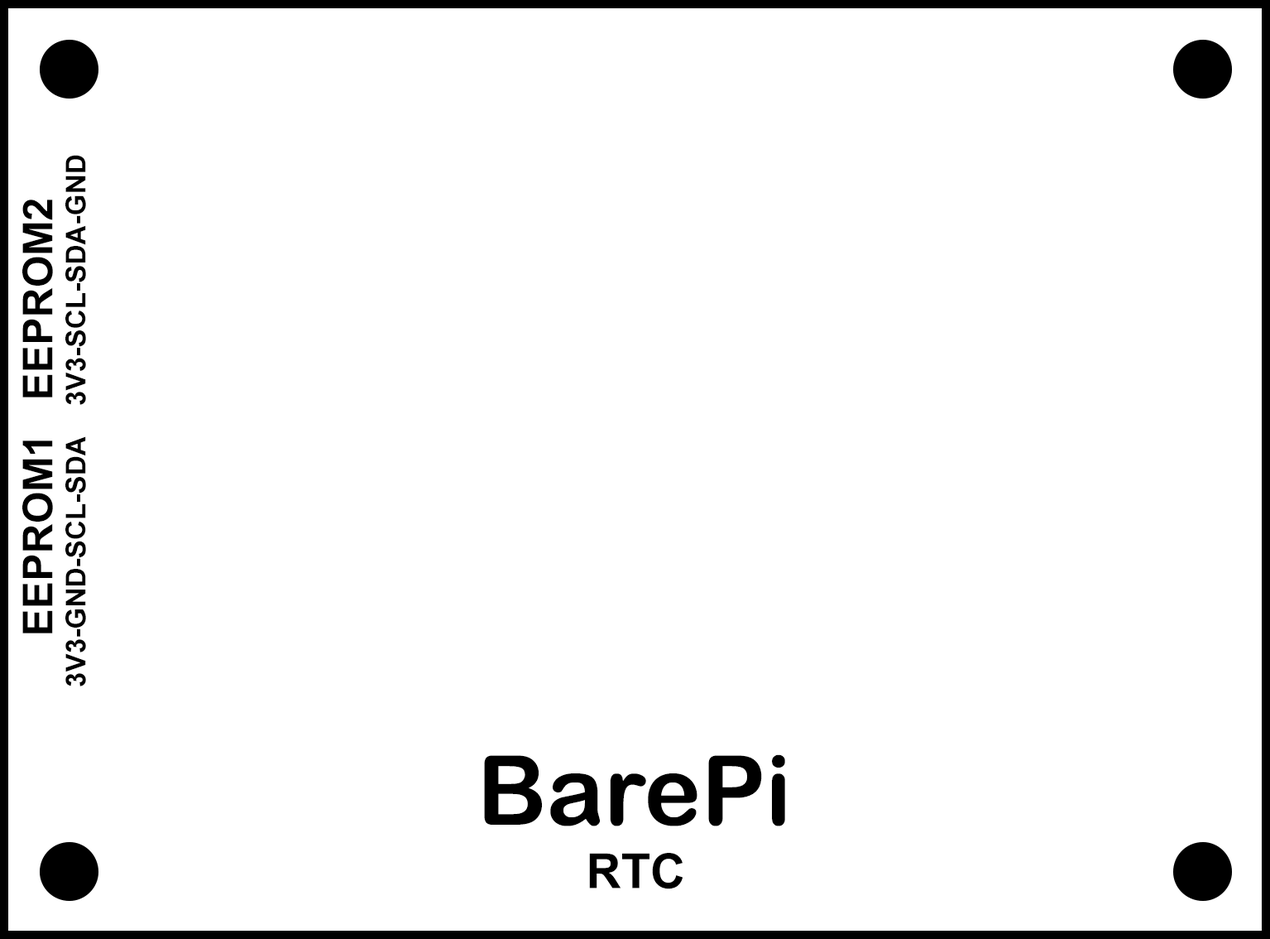
<style>
.page{position:relative;width:1270px;height:939px;background:#ffffff}
.page>*{position:absolute;margin:0}
.t1{font:27.6px "Arial-BoldMT";color:#000000}
.t2{font:41.4px "Arial-BoldMT";color:#000000}
.t3{font:96.6px "ArialRoundedMTBold";color:#000000}
.t4{font:48.3px "Arial-BoldMT";color:#000000}
</style>
<div class="page">
<p class="t1" style="left:22px;top:155px;width:64px;height:250px;text-align:center;rotate:-90deg"><span class="t2">EEPROM2<br></span>     3V3-SCL-SDA-GND</p>
<p class="t1" style="left:22px;top:436px;width:64px;height:250px;text-align:center;rotate:-90deg"><span class="t2">EEPROM1<br></span>3V3-GND-SCL-SDA</p>
<p class="t3" style="left:484px;top:754px;width:301px;height:72px">BarePi</p>
<p class="t4" style="left:589px;top:852px;width:95px;height:37px">RTC</p>
</div>
